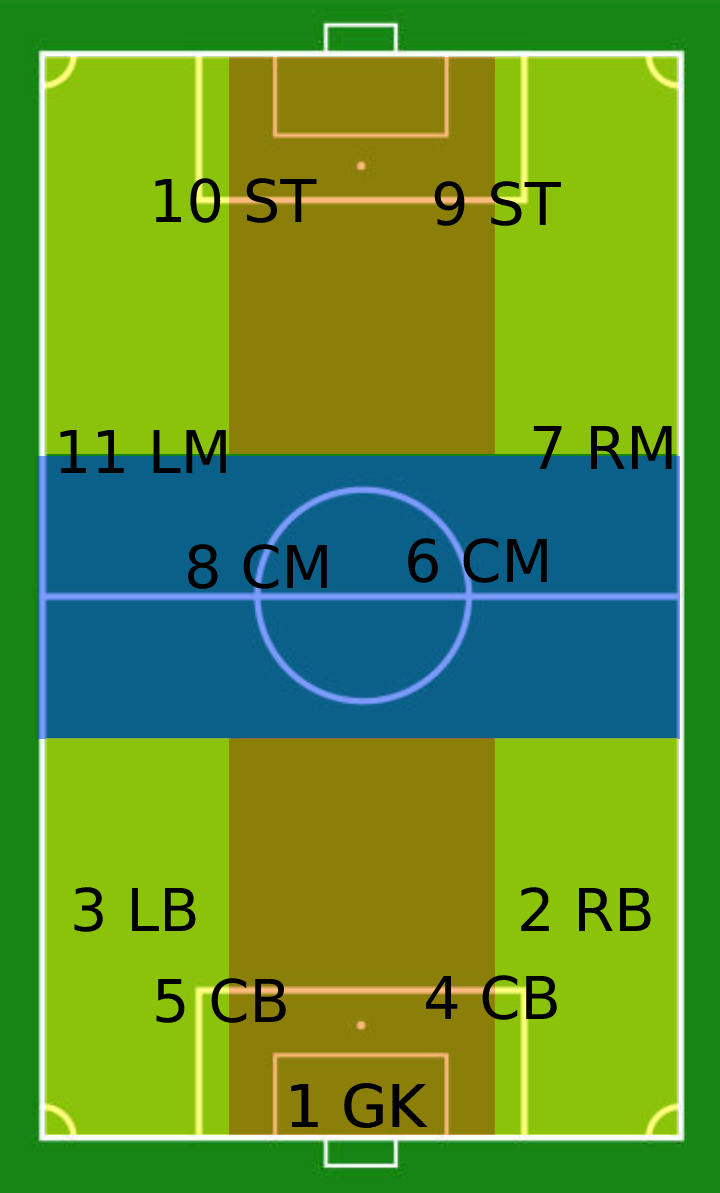
<style>
.page{position:relative;width:720px;height:1193px;background:#8bc20a}
.page>*{position:absolute;margin:0}
.t1{font:59px "DejaVuSans";color:#000000}
</style>
<div class="page">
<p class="t1" style="left:155px;top:178px;width:162px;height:45px">10 ST</p>
<p class="t1" style="left:434px;top:181px;width:127px;height:45px">9 ST</p>
<p class="t1" style="left:533px;top:425px;width:139px;height:44px">7 RM</p>
<p class="t1" style="left:60px;top:429px;width:166px;height:44px">11 LM</p>
<p class="t1" style="left:188px;top:544px;width:139px;height:45px">8 CM</p>
<p class="t1" style="left:408px;top:538px;width:139px;height:45px">6 CM</p>
<p class="t1" style="left:74px;top:887px;width:122px;height:45px">3 LB</p>
<p class="t1" style="left:521px;top:887px;width:130px;height:44px">2 RB</p>
<p class="t1" style="left:425px;top:975px;width:132px;height:45px">4 CB</p>
<p class="t1" style="left:156px;top:978px;width:130px;height:45px">5 CB</p>
<p class="t1" style="left:291px;top:1083px;width:136px;height:45px">1 GK</p>
<p class="t1" style="left:292px;top:1083px;width:136px;height:45px">1 GK</p>
</div>
